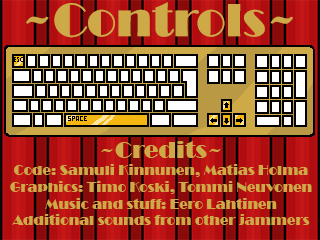
<style>
.page{position:relative;width:320px;height:240px}
.page>*{position:absolute;margin:0}
.t1{font:48px "Broadway";color:#cea947}
.t2{font:14px "Broadway";color:#cea947}
.t3{font:24px "Broadway";color:#cea947}
</style>
<div class="page">
<p class="t1" style="left:26px;top:2px;width:267px;height:36px">~Controls~</p>
<p class="t2" style="left:10px;top:141px;width:302px;height:84px;text-align:center"><span class="t3">~Credits~<br></span>Code: Samuli Kinnunen, Matias Holma<br>Graphics: Timo Koski, Tommi Neuvonen<br>Music and stuff: Eero Lahtinen<br>Additional sounds from other jammers</p>
</div>
